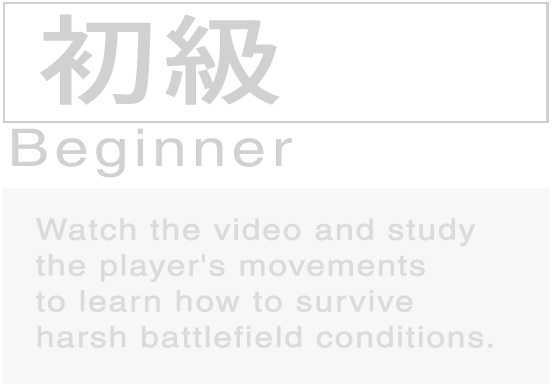
<style>
.page{position:relative;width:552px;height:386px;background:#f7f7f7}
.page>*{position:absolute;margin:0}
.t1{font:96.5px "Sarasa-Gothic-J-SemiBold";letter-spacing:0.026em;color:#d1d1d1;font-weight:bold;scale:1.23 1}
.t2{font:51.8px "Helvetica";letter-spacing:0.083em;color:#d1d1d1;scale:1.2 1}
.t3{font:29.1px/35.8px "Helvetica";letter-spacing:0.03em;color:#dbdbdb;font-weight:bold;scale:1.15 1}
</style>
<div class="page">
<p class="t1" style="left:40px;top:14px;width:240px;height:91px">初級</p>
<p class="t2" style="left:12px;top:128px;width:280px;height:50px">Beginner</p>
<p class="t3" style="left:36px;top:218px;width:457px;height:130px">Watch the video and study <br>the player's movements <br>to learn how to survive <br>harsh battlefield conditions.</p>
</div>
